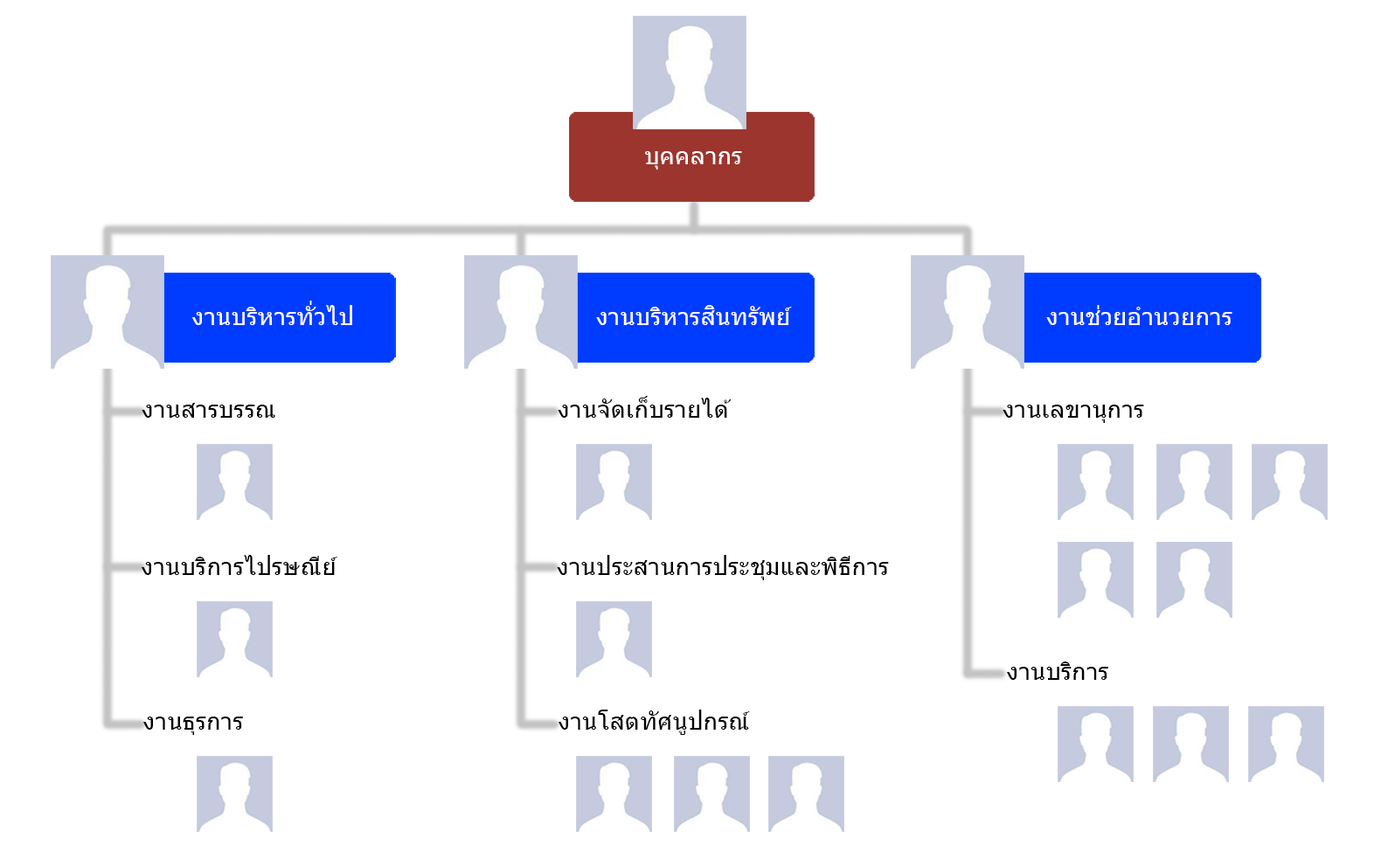
<style>
.page{position:relative;width:1388px;height:859px;background:#ffffff}
.page>*{position:absolute;margin:0}
.t1{font:24.7px "Tahoma";color:#ffffff}
.t2{font:24.7px "Tahoma";color:#000000}
</style>
<div class="page">
<p class="t1" style="left:645px;top:151px;width:97px;height:19px">บุคคลากร</p>
<p class="t1" style="left:192px;top:301px;width:160px;height:24px">งานบริหารทั่วไป</p>
<p class="t1" style="left:596px;top:305px;width:196px;height:20px">งานบริหารสินทรัพย์</p>
<p class="t1" style="left:1046px;top:305px;width:186px;height:20px">งานช่วยอำนวยการ</p>
<p class="t2" style="left:558px;top:396px;width:174px;height:22px">งานจัดเก็บรายได้</p>
<p class="t2" style="left:142px;top:403px;width:133px;height:15px">งานสารบรรณ</p>
<p class="t2" style="left:1002px;top:405px;width:142px;height:18px">งานเลขานุการ</p>
<p class="t2" style="left:142px;top:555px;width:195px;height:20px">งานบริการไปรษณีย์</p>
<p class="t2" style="left:557px;top:555px;width:332px;height:25px">งานประสานการประชุมและพิธีการ</p>
<p class="t2" style="left:1007px;top:662px;width:101px;height:18px">งานบริการ</p>
<p class="t2" style="left:558px;top:710px;width:192px;height:25px">งานโสตทัศนูปกรณ์</p>
<p class="t2" style="left:143px;top:717px;width:100px;height:18px">งานธุรการ</p>
</div>
